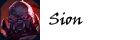
<style>
.page{position:relative;width:140px;height:40px;background:#ffffff}
.page>*{position:absolute;margin:0}
.t1{font:12px "VinerHandITC";color:#000000}
</style>
<div class="page">
<p class="t1" style="left:49px;top:12px;width:34px;height:14px">Sion</p>
</div>
